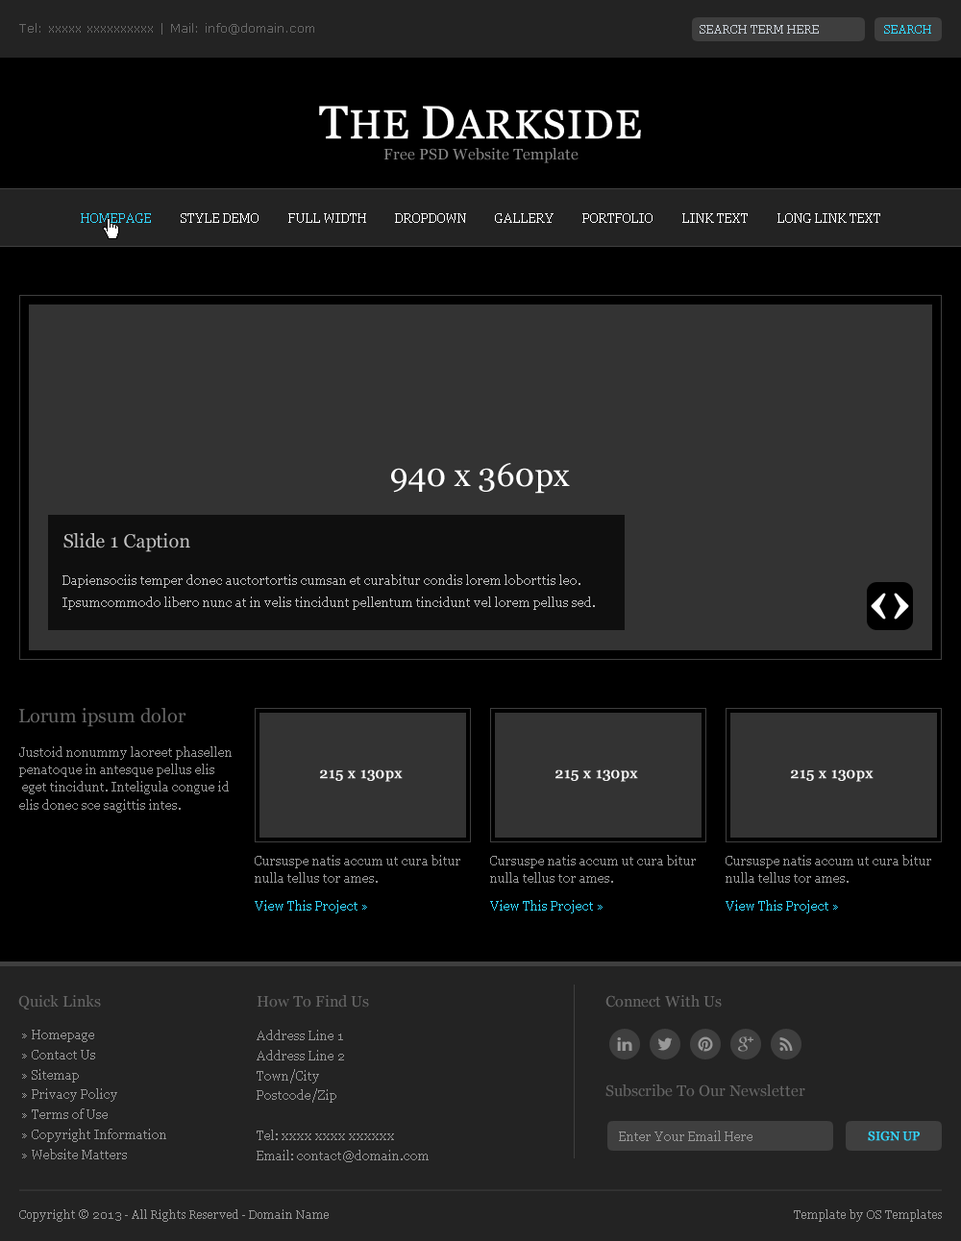
<style>
.page{position:relative;width:961px;height:1241px;background:#000000}
.page>*{position:absolute;margin:0}
.t1{font:12.5px "Verdana";color:#676767}
.t2{font:11.5px "Georgia";color:#c7ced6}
.t3{font:11.5px "Georgia";color:#33d7ff}
.t4{font:40.3px "Georgia";color:#ffffff;font-weight:bold}
.t5{font:46.1px "Georgia";color:#ffffff;font-weight:bold}
.t6{font:15.4px "Georgia";color:#858585}
.t7{font:12.5px "Georgia";color:#33d7ff}
.t8{font:12.5px "Georgia";color:#ffffff}
.t9{font:32.7px "Georgia";color:#ffffff}
.t10{font:19.2px "Georgia";color:#c2c2c2}
.t11{font:12.5px/22.5px "Georgia";color:#c0c0c0}
.t12{font:19.2px "Georgia";color:#666666}
.t13{font:12.5px/17.5px "Georgia";color:#989898}
.t14{font:15px "Georgia";color:#f8f8f8;font-weight:bold}
.t15{font:15.4px "Georgia";color:#666666}
.t16{font:12.5px/20px "Georgia";color:#979797}
.t17{font:12.5px "Georgia";color:#989898}
.t18{font:12.5px "Georgia";color:#33d7ff;text-transform:uppercase;font-weight:bold}
.t19{font:11.5px "Georgia";color:#979797}
</style>
<div class="page">
<p class="t1" style="left:19px;top:23px;width:295px;height:12px">Tel: xxxxx xxxxxxxxxx | Mail: info@domain.com</p>
<p class="t2" style="left:699px;top:25px;width:120px;height:9px">SEARCH TERM HERE</p>
<p class="t3" style="left:884px;top:25px;width:47px;height:9px">SEARCH</p>
<p class="t4" style="left:319px;top:106px;width:322px;height:33px"><span class="t5">T</span>HE <span class="t5">D</span>ARKSIDE</p>
<p class="t6" style="left:383px;top:148px;width:195px;height:15px">Free PSD Website Template</p>
<p class="t7" style="left:81px;top:213px;width:70px;height:10px">HOMEPAGE</p>
<p class="t8" style="left:181px;top:213px;width:77px;height:10px">STYLE DEMO</p>
<p class="t8" style="left:288px;top:213px;width:78px;height:10px">FULL WIDTH</p>
<p class="t8" style="left:395px;top:213px;width:71px;height:10px">DROPDOWN</p>
<p class="t8" style="left:495px;top:213px;width:58px;height:10px">GALLERY</p>
<p class="t8" style="left:582px;top:213px;width:70px;height:10px">PORTFOLIO</p>
<p class="t8" style="left:682px;top:213px;width:65px;height:10px">LINK TEXT</p>
<p class="t8" style="left:777px;top:213px;width:103px;height:10px">LONG LINK TEXT</p>
<p class="t9" style="left:391px;top:463px;width:179px;height:31px">940 x 360px</p>
<p class="t10" style="left:63px;top:533px;width:127px;height:19px">Slide 1 Caption</p>
<p class="t11" style="left:62px;top:574px;width:533px;height:36px">Dapiensociis temper donec auctortortis cumsan et curabitur condis lorem loborttis leo. Ipsumcommodo libero nunc at in velis tincidunt pellentum tincidunt vel lorem pellus sed.</p>
<p class="t12" style="left:19px;top:708px;width:167px;height:19px">Lorum ipsum dolor</p>
<p class="t13" style="left:19px;top:746px;width:213px;height:67px">Justoid nonummy laoreet phasellen<br>penatoque in antesque pellus elis<br> eget tincidunt. Inteligula congue id <br>elis donec sce sagittis intes.</p>
<p class="t14" style="left:320px;top:770px;width:83px;height:12px">215 x 130px</p>
<p class="t14" style="left:555px;top:770px;width:83px;height:12px">215 x 130px</p>
<p class="t14" style="left:791px;top:770px;width:82px;height:12px">215 x 130px</p>
<p class="t13" style="left:255px;top:855px;width:205px;height:28px">Cursuspe natis accum ut cura bitur nulla tellus tor ames.</p>
<p class="t13" style="left:490px;top:855px;width:206px;height:28px">Cursuspe natis accum ut cura bitur nulla tellus tor ames.</p>
<p class="t13" style="left:725px;top:855px;width:206px;height:28px">Cursuspe natis accum ut cura bitur nulla tellus tor ames.</p>
<p class="t7" style="left:255px;top:900px;width:112px;height:14px">View This Project »</p>
<p class="t7" style="left:490px;top:900px;width:112px;height:14px">View This Project »</p>
<p class="t7" style="left:725px;top:900px;width:113px;height:14px">View This Project »</p>
<p class="t15" style="left:18px;top:995px;width:83px;height:15px">Quick Links</p>
<p class="t15" style="left:257px;top:995px;width:112px;height:13px">How To Find Us</p>
<p class="t15" style="left:605px;top:995px;width:116px;height:13px">Connect With Us</p>
<p class="t16" style="left:22px;top:1030px;width:144px;height:130px">» Homepage<br>» Contact Us<br>» Sitemap<br>» Privacy Policy<br>» Terms of Use<br>» Copyright Information<br>» Website Matters</p>
<p class="t16" style="left:257px;top:1030px;width:171px;height:132px">Address Line 1<br>Address Line 2<br>Town/City<br>Postcode/Zip<br><br>Tel: xxxx xxxx xxxxxx<br>Email: contact@domain.com</p>
<p class="t15" style="left:605px;top:1085px;width:200px;height:12px">Subscribe To Our Newsletter</p>
<p class="t17" style="left:619px;top:1131px;width:133px;height:10px">Enter Your Email Here</p>
<p class="t18" style="left:868px;top:1131px;width:51px;height:10px">SIGN UP</p>
<p class="t19" style="left:19px;top:1210px;width:310px;height:12px">Copyright © 2013 - All Rights Reserved - Domain Name</p>
<p class="t19" style="left:794px;top:1210px;width:147px;height:12px">Template by OS Templates</p>
</div>
